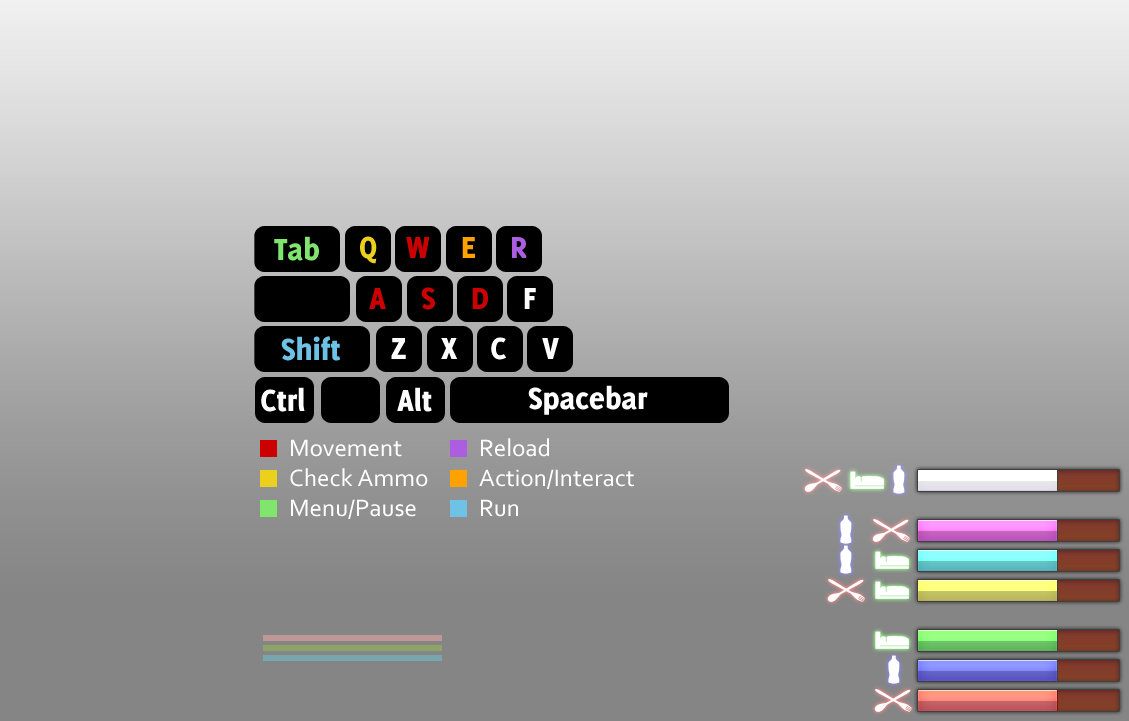
<style>
.page{position:relative;width:1129px;height:721px}
.page>*{position:absolute;margin:0}
.t1{font:33.3px "Delicious-Heavy";color:#80e56d}
.t2{font:33.3px "Delicious-Heavy";color:#ebd01d}
.t3{font:33.3px "Delicious-Heavy";color:#cc0000}
.t4{font:33.3px "Delicious-Heavy";color:#ffa200}
.t5{font:33.3px "Delicious-Heavy";color:#ad5ddf}
.t6{font:33.3px "Delicious-Heavy";color:#ffffff}
.t7{font:33.3px "Delicious-Heavy";color:#6dc2e5}
.t8{font:25px "Corbel";color:#ffffff}
</style>
<div class="page">
<p class="t1" style="left:274px;top:236px;width:45px;height:25px">Tab</p>
<p class="t2" style="left:360px;top:236px;width:17px;height:28px">Q</p>
<p class="t3" style="left:406px;top:237px;width:24px;height:21px">W</p>
<p class="t4" style="left:462px;top:237px;width:13px;height:21px">E</p>
<p class="t5" style="left:512px;top:237px;width:15px;height:21px">R</p>
<p class="t3" style="left:369px;top:288px;width:17px;height:21px">A</p>
<p class="t3" style="left:421px;top:287px;width:14px;height:23px">S</p>
<p class="t3" style="left:472px;top:288px;width:16px;height:21px">D</p>
<p class="t6" style="left:524px;top:288px;width:12px;height:21px">F</p>
<p class="t7" style="left:281px;top:336px;width:60px;height:25px">Shift</p>
<p class="t6" style="left:391px;top:338px;width:15px;height:21px">Z</p>
<p class="t6" style="left:441px;top:338px;width:17px;height:21px">X</p>
<p class="t6" style="left:491px;top:337px;width:15px;height:23px">C</p>
<p class="t6" style="left:542px;top:338px;width:17px;height:21px">V</p>
<p class="t6" style="left:261px;top:387px;width:44px;height:25px">Ctrl</p>
<p class="t6" style="left:397px;top:387px;width:35px;height:25px">Alt</p>
<p class="t6" style="left:528px;top:385px;width:120px;height:30px">Spacebar</p>
<p class="t8" style="left:481px;top:438px;width:68px;height:19px">Reload</p>
<p class="t8" style="left:291px;top:439px;width:111px;height:18px">Movement</p>
<p class="t8" style="left:290px;top:468px;width:138px;height:19px">Check Ammo</p>
<p class="t8" style="left:479px;top:469px;width:155px;height:20px">Action/Interact</p>
<p class="t8" style="left:291px;top:499px;width:125px;height:20px">Menu/Pause</p>
<p class="t8" style="left:481px;top:499px;width:37px;height:18px">Run</p>
</div>
